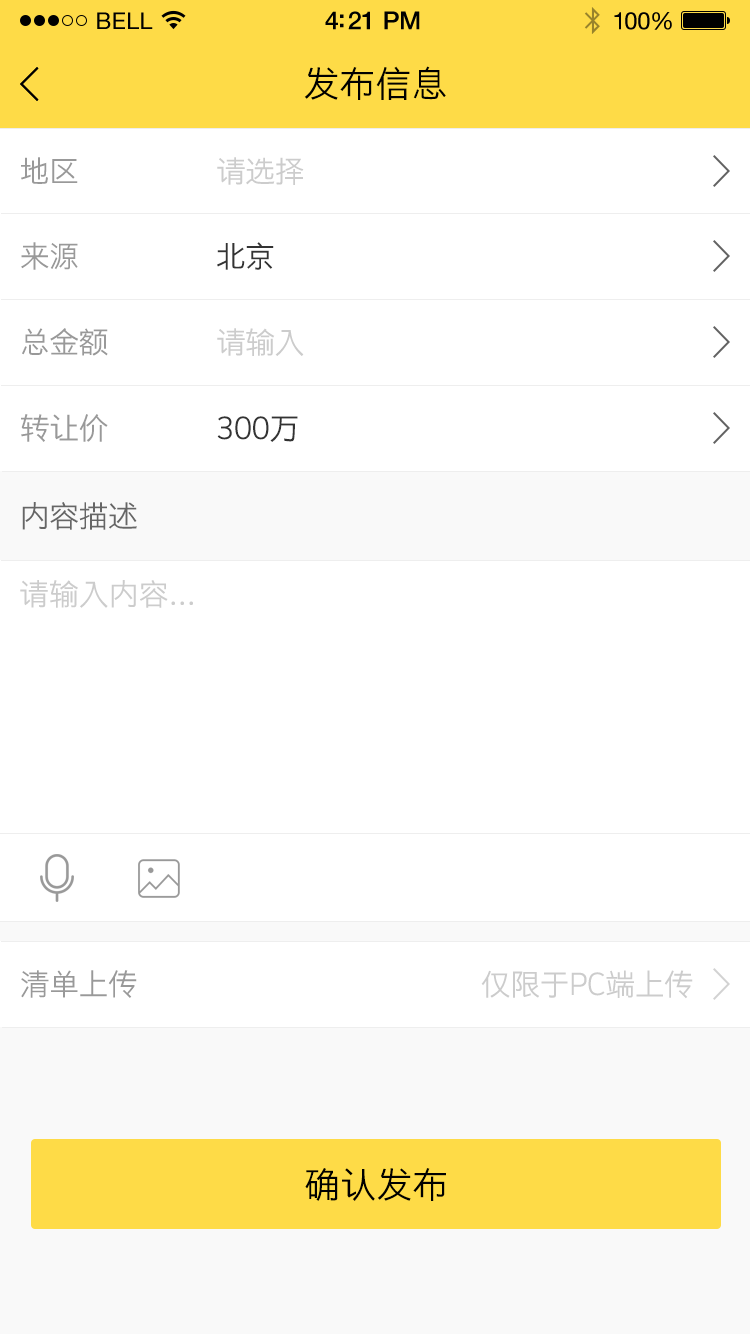
<style>
.page{position:relative;width:750px;height:1334px;background:#ffffff}
.page>*{position:absolute;margin:0}
.t1{font:23px "HelveticaNeue";letter-spacing:0.02em;color:#000000}
.t2{font:25px "HelveticaNeue-Medium";letter-spacing:-0.02em;color:#000000}
.t3{font:24px "HelveticaNeue";letter-spacing:-0.02em;color:#010101}
.t4{font:36px "STHeitiSC-Light";color:#000000}
.t5{font:30px "STHeitiSC-Light";letter-spacing:-0.02em;color:#999999}
.t6{font:30px "STHeitiSC-Light";letter-spacing:-0.02em;color:#cccccc}
.t7{font:30px "STHeitiSC-Light";letter-spacing:-0.02em;color:#333333}
.t8{font:30px "STHeitiSC-Light";letter-spacing:-0.02em;color:#666666}
.t9{font:30px "STHeitiSC-Light";color:#cccccc}
</style>
<div class="page">
<p class="t1" style="left:97px;top:12px;width:56px;height:17px">BELL</p>
<p class="t1" style="left:97px;top:12px;width:56px;height:17px">BELL</p>
<p class="t2" style="left:325px;top:11px;width:95px;height:19px">4:21 PM</p>
<p class="t2" style="left:325px;top:11px;width:95px;height:19px">4:21 PM</p>
<p class="t3" style="left:614px;top:12px;width:58px;height:18px">100%</p>
<p class="t3" style="left:614px;top:12px;width:58px;height:18px">100%</p>
<p class="t4" style="left:304px;top:66px;width:142px;height:34px">发布信息</p>
<p class="t5" style="left:21px;top:157px;width:57px;height:27px">地区</p>
<p class="t6" style="left:217px;top:157px;width:87px;height:28px">请选择</p>
<p class="t5" style="left:21px;top:242px;width:57px;height:28px">来源</p>
<p class="t7" style="left:217px;top:242px;width:57px;height:28px">北京</p>
<p class="t5" style="left:22px;top:328px;width:86px;height:28px">总金额</p>
<p class="t6" style="left:217px;top:328px;width:87px;height:28px">请输入</p>
<p class="t5" style="left:21px;top:414px;width:87px;height:28px">转让价</p>
<p class="t7" style="left:217px;top:416px;width:81px;height:26px">300万</p>
<p class="t8" style="left:22px;top:502px;width:115px;height:28px">内容描述</p>
<p class="t9" style="left:20px;top:580px;width:173px;height:28px">请输入内容...</p>
<p class="t5" style="left:21px;top:970px;width:116px;height:28px">清单上传</p>
<p class="t6" style="left:481px;top:970px;width:212px;height:29px">仅限于PC端上传</p>
<p class="t4" style="left:305px;top:1168px;width:141px;height:33px">确认发布</p>
</div>
